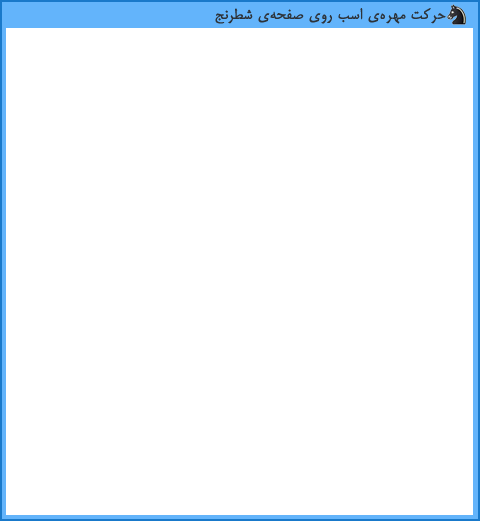
<style>
.page{position:relative;width:480px;height:521px;background:#ffffff}
.page>*{position:absolute;margin:0}
.t1{font:18px "BMitra";color:#2d3339;font-weight:bold}
</style>
<div class="page">
<p class="t1" style="left:215px;top:8px;width:231px;height:16px">حرکت مهره‌ی اسب روی صفحه‌ی شطرنج</p>
</div>
